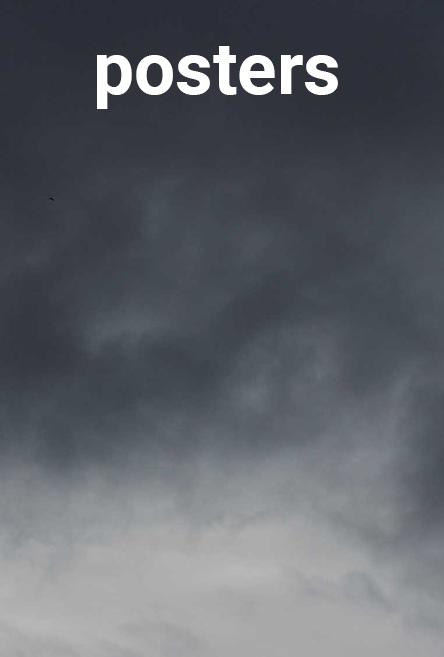
<style>
.page{position:relative;width:444px;height:657px}
.page>*{position:absolute;margin:0}
.t1{font:72.9px "Roboto-Bold";color:#ffffff}
</style>
<div class="page">
<p class="t1" style="left:97px;top:46px;width:241px;height:63px">posters</p>
</div>
